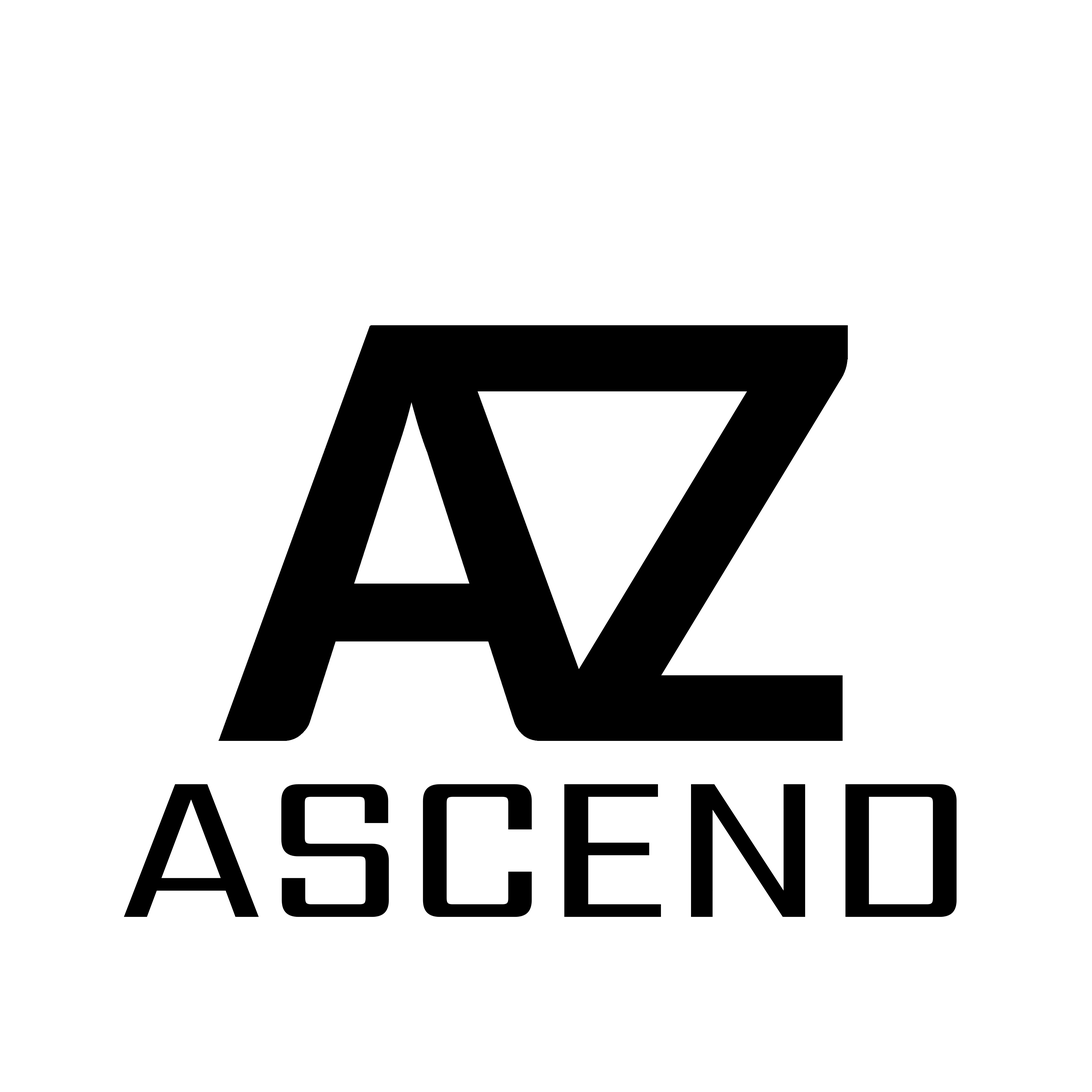
<style>
.page{position:relative;width:1092px;height:1092px;background:#ffffff}
.page>*{position:absolute;margin:0}
.t1{font:213.3px "Sarpanch-Medium";color:#000000}
</style>
<div class="page">
<p class="t1" style="left:124px;top:784px;width:833px;height:133px">ASCEND</p>
</div>
